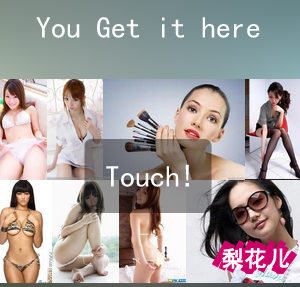
<style>
.page{position:relative;width:300px;height:287px}
.page>*{position:absolute;margin:0}
.t1{font:30px "SimHei";color:#ffffff}
</style>
<div class="page">
<p class="t1" style="left:36px;top:17px;width:224px;height:21px">You Get it here</p>
<p class="t1" style="left:106px;top:164px;width:83px;height:23px">Touch!</p>
</div>
